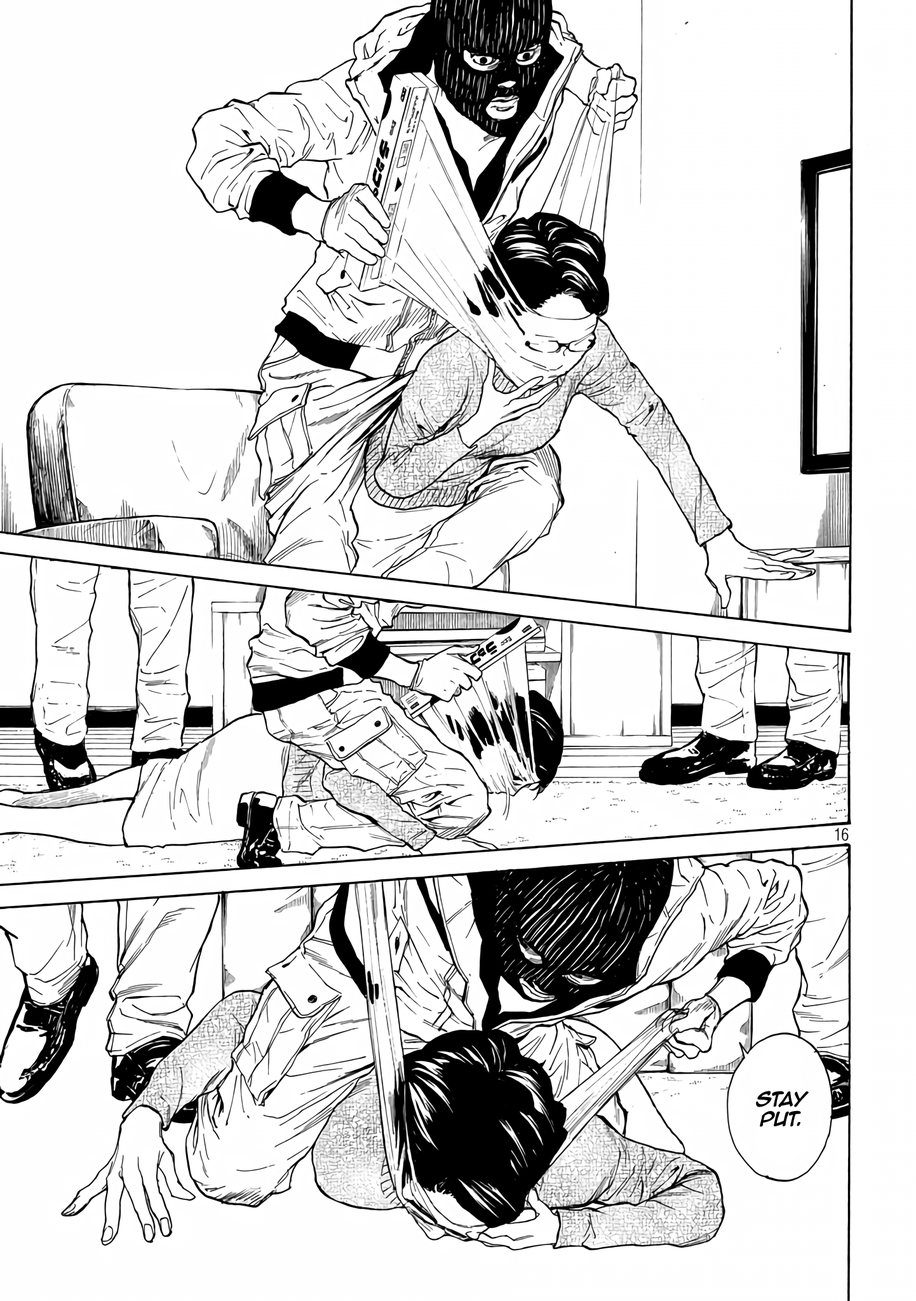
<style>
.page{position:relative;width:916px;height:1301px;background:#ffffff}
.page>*{position:absolute;margin:0}
.t1{font:16.5px "AnimeAce2.0BB-Bold";color:#000000}
</style>
<div class="page">
<p class="t1" style="left:756px;top:1091px;width:53px;height:36px;text-align:center">Stay<br>put.</p>
</div>
